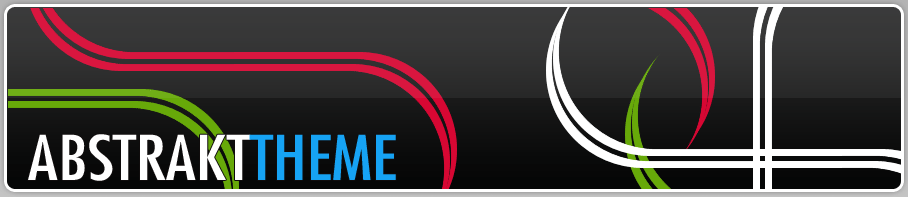
<style>
.page{position:relative;width:908px;height:197px}
.page>*{position:absolute;margin:0}
.t1{font:60px "Futura-Condensed-Normal";color:#ffffff;scale:1.2 1}
.t2{font:60px "Futura-Condensed-Normal";color:#16a3f4;scale:1.2 1}
</style>
<div class="page">
<p class="t1" style="left:28px;top:134px;width:368px;height:47px">ABSTRAKT<span class="t2">THEME</span></p>
</div>
